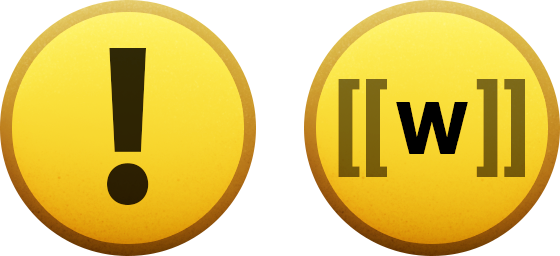
<style>
.page{position:relative;width:560px;height:256px;background:#ffffff}
.page>*{position:absolute;margin:0}
.t1{font:230px "MyriadPro-Bold";color:#2e2403}
.t2{font:99px "Roboto-Bold";color:#7a6311}
.t3{font:72px "Tahoma-Bold";color:#000000}
</style>
<div class="page">
<p class="t1" style="left:107px;top:48px;width:42px;height:157px">!</p>
<p class="t2" style="left:338px;top:79px;width:187px;height:98px">[[    ]]</p>
<p class="t3" style="left:396px;top:102px;width:72px;height:52px">W</p>
</div>
